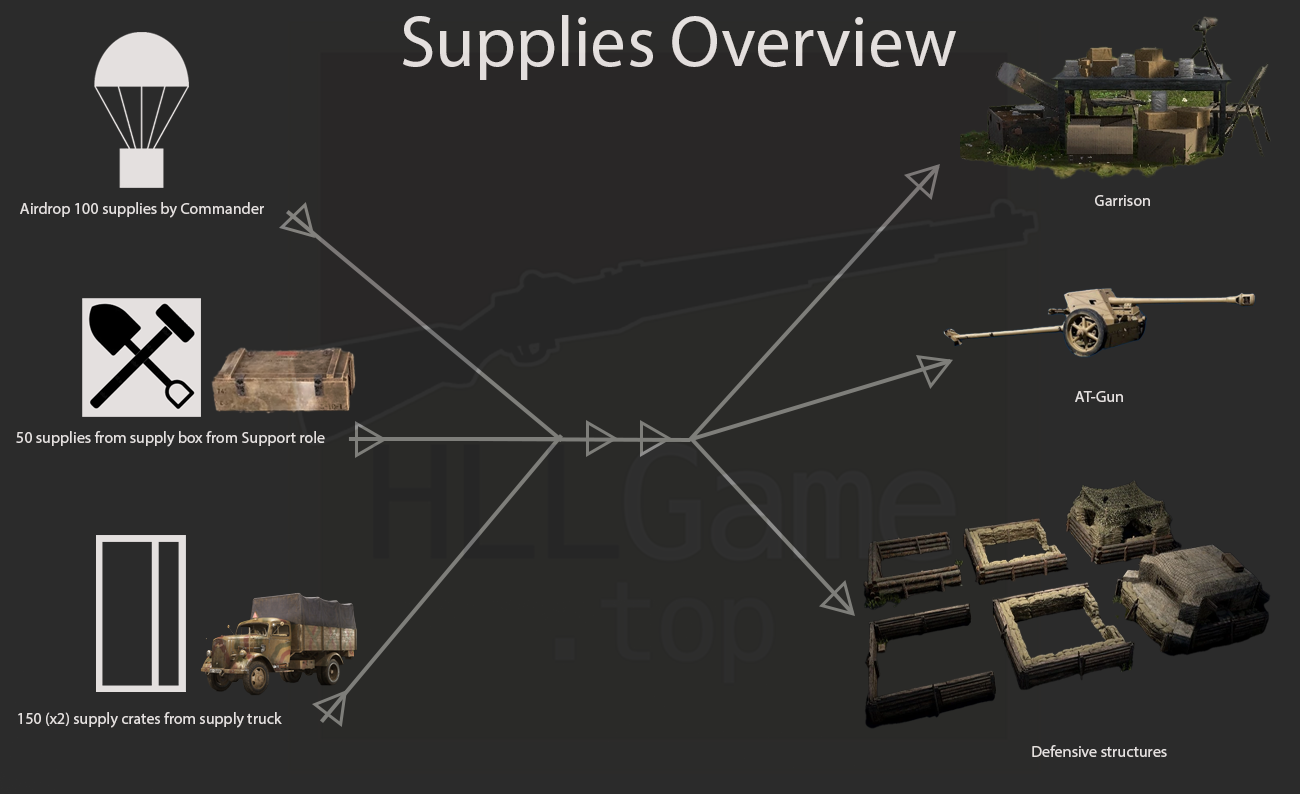
<style>
.page{position:relative;width:1300px;height:794px;background:#2b2b2b}
.page>*{position:absolute;margin:0}
.t1{font:72px "MyriadPro-Regular";color:#e4e0df}
.t2{font:16px "MyriadPro-Regular";color:#e4e0df}
</style>
<div class="page">
<p class="t1" style="left:403px;top:15px;width:553px;height:65px">Supplies Overview</p>
<p class="t2" style="left:1095px;top:195px;width:55px;height:11px">Garrison</p>
<p class="t2" style="left:20px;top:202px;width:244px;height:16px">Airdrop 100 supplies by Commander</p>
<p class="t2" style="left:1075px;top:391px;width:48px;height:11px">AT-Gun</p>
<p class="t2" style="left:16px;top:431px;width:309px;height:16px">50 supplies from supply box from Support role</p>
<p class="t2" style="left:18px;top:712px;width:264px;height:16px">150 (x2) supply crates from supply truck</p>
<p class="t2" style="left:1032px;top:745px;width:135px;height:12px">Defensive structures</p>
</div>
